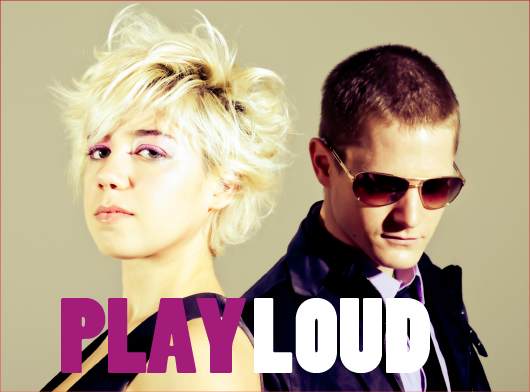
<style>
.page{position:relative;width:530px;height:392px}
.page>*{position:absolute;margin:0}
.t1{font:100px "PoplarStd";color:#a41c79}
.t2{font:100px "PoplarStd";color:#ffffff}
</style>
<div class="page">
<p class="t1" style="left:61px;top:298px;width:185px;height:75px">PLAY</p>
<p class="t2" style="left:254px;top:298px;width:176px;height:75px">LOUD</p>
</div>
